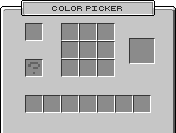
<style>
.page{position:relative;width:176px;height:133px;background:#c6c6c6}
.page>*{position:absolute;margin:0}
.t1{font:7px "RetroComputer";letter-spacing:0.04em;color:#2b2b2b}
.t2{font:17px "RetroComputer";letter-spacing:0.04em;color:#636363}
</style>
<div class="page">
<p class="t1" style="left:52px;top:6px;width:70px;height:5px">Color Picker</p>
<p class="t2" style="left:28px;top:62px;width:12px;height:12px">?</p>
</div>
